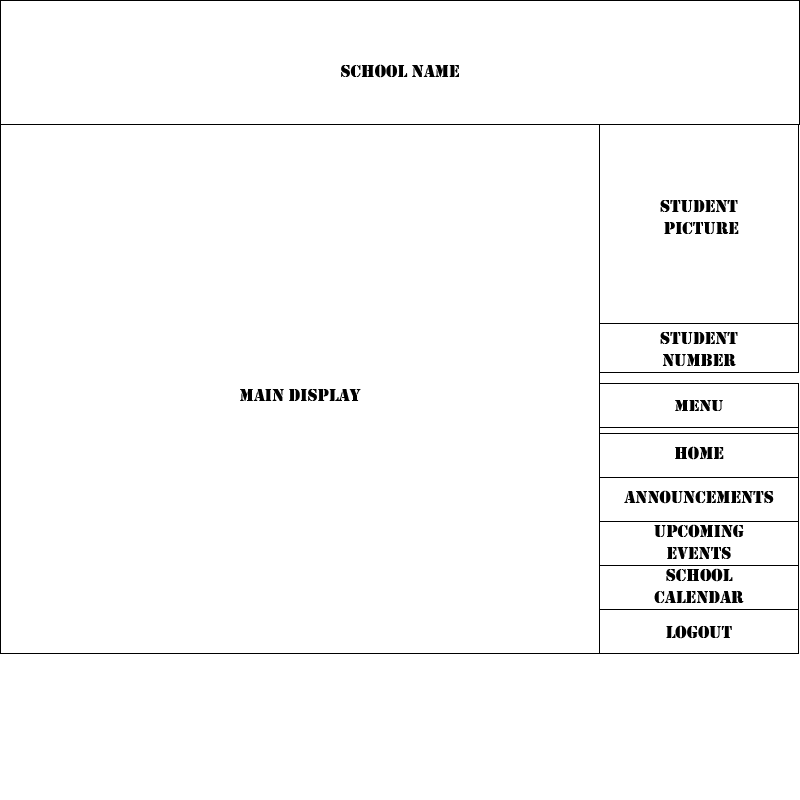
<style>
.page{position:relative;width:800px;height:800px;background:#ffffff}
.page>*{position:absolute;margin:0}
.t1{font:18px "Stencil";color:#000000}
.t2{font:17.2px "Stencil";color:#000000;scale:1.05 1}
</style>
<div class="page">
<p class="t1" style="left:341px;top:64px;width:118px;height:14px">School Name</p>
<p class="t1" style="left:660px;top:200px;width:79px;height:34px;text-align:center">Student<br> picture</p>
<p class="t1" style="left:660px;top:332px;width:78px;height:34px;text-align:center">Student <br>number</p>
<p class="t1" style="left:240px;top:389px;width:121px;height:12px">Main Display</p>
<p class="t2" style="left:675px;top:400px;width:48px;height:11px">Menu</p>
<p class="t1" style="left:675px;top:446px;width:49px;height:14px">Home</p>
<p class="t1" style="left:624px;top:490px;width:150px;height:14px">Announcements</p>
<p class="t1" style="left:654px;top:524px;width:90px;height:35px;text-align:center">Upcoming<br>Events</p>
<p class="t1" style="left:654px;top:568px;width:90px;height:35px;text-align:center">School<br>Calendar</p>
<p class="t1" style="left:666px;top:625px;width:66px;height:14px">Logout</p>
</div>
